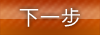
<style>
.page{position:relative;width:100px;height:35px}
.page>*{position:absolute;margin:0}
.t1{font:20px "NewGothic-Medium";letter-spacing:0.05em;color:#fefefe;text-transform:uppercase}
</style>
<div class="page">
<p class="t1" style="left:19px;top:8px;width:61px;height:19px">下一步</p>
</div>
